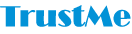
<style>
.page{position:relative;width:132px;height:34px;background:#ffffff}
.page>*{position:absolute;margin:0}
.t1{font:30px "Broadway";color:#0292d7}
</style>
<div class="page">
<p class="t1" style="left:0px;top:5px;width:131px;height:22px">TrustMe</p>
</div>
